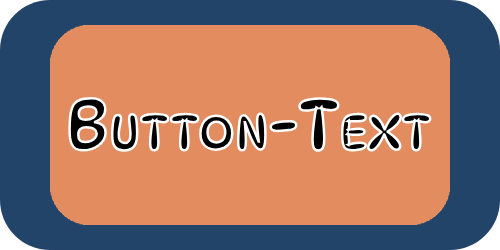
<style>
.page{position:relative;width:500px;height:250px;background:#e28c60}
.page>*{position:absolute;margin:0}
.t1{font:70px "DynaPuff-Regular";font-variant:small-caps}
</style>
<div class="page">
<p class="t1" style="left:63px;top:92px;width:374px;height:65px">Button-Text</p>
</div>
